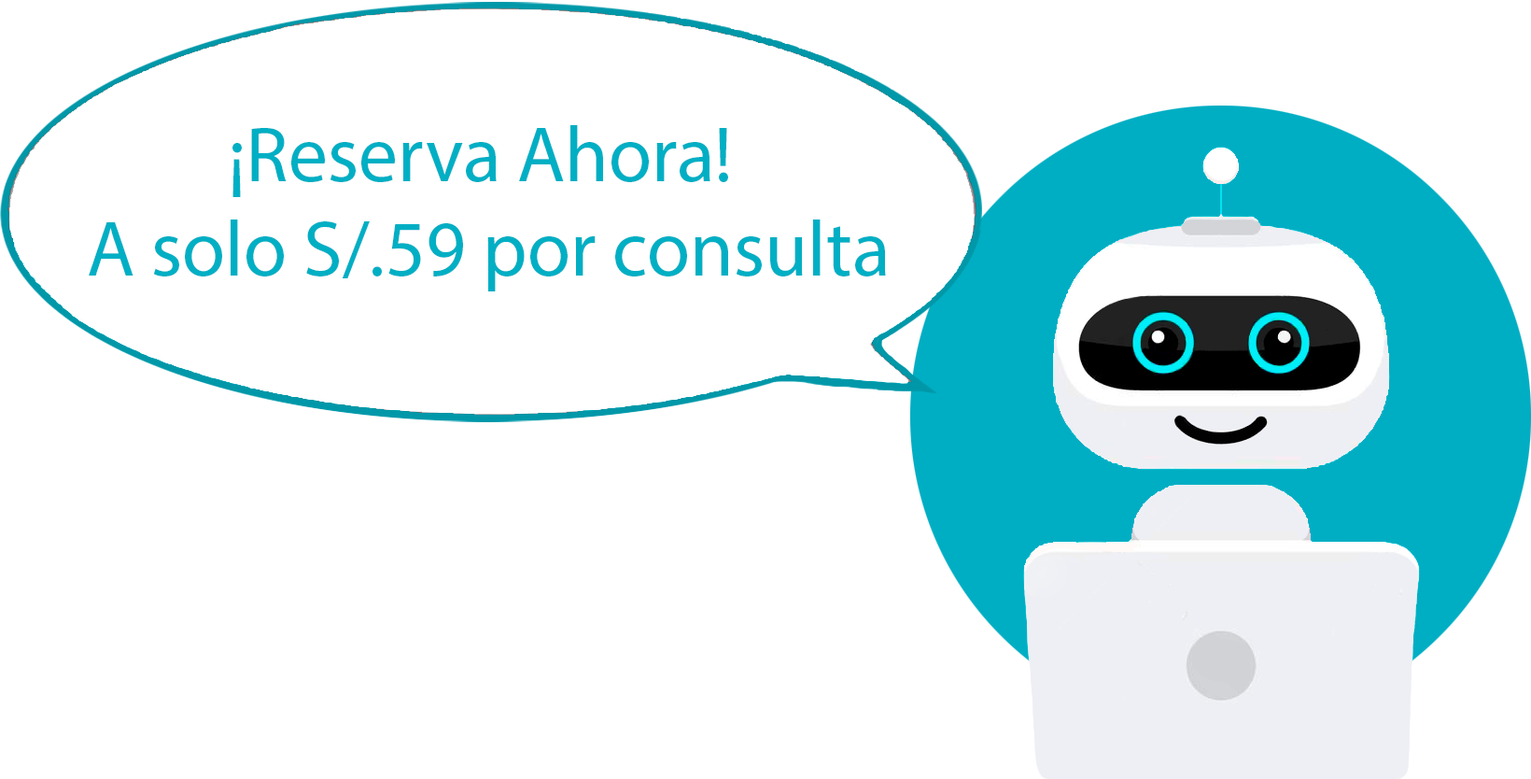
<style>
.page{position:relative;width:1531px;height:779px;background:#ffffff}
.page>*{position:absolute;margin:0}
.t1{font:78.4px "MyriadPro-Regular";color:#00afc4}
</style>
<div class="page">
<p class="t1" style="left:89px;top:125px;width:797px;height:166px;text-align:center">¡Reserva Ahora! <br>A solo S/.59 por consulta</p>
</div>
